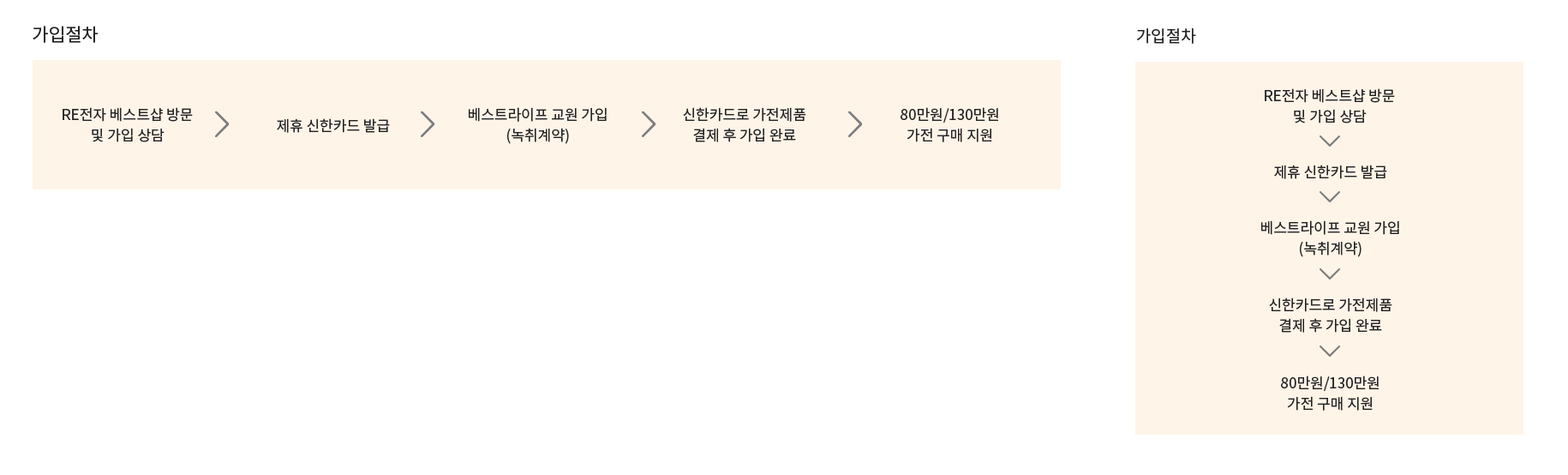
<style>
.page{position:relative;width:1568px;height:475px;background:#ffffff}
.page>*{position:absolute;margin:0}
.t1{font:18px "NotoSansKR-Regular";color:#222222}
.t2{font:16.3px "NotoSansKR-Regular";color:#222222}
.t3{font:14.6px/20.6px "NotoSansKR-Regular";color:#222222}
.t4{font:14.6px "NotoSansKR-Regular";color:#222222}
</style>
<div class="page">
<p class="t1" style="left:33px;top:26px;width:66px;height:17px">가입절차</p>
<p class="t2" style="left:1137px;top:28px;width:59px;height:16px">가입절차</p>
<p class="t3" style="left:1265px;top:88px;width:130px;height:35px;text-align:center">RE전자 베스트샵 방문<br>및 가입 상담</p>
<p class="t3" style="left:63px;top:107px;width:130px;height:35px;text-align:center">RE전자 베스트샵 방문<br>및 가입 상담</p>
<p class="t3" style="left:469px;top:107px;width:138px;height:37px;text-align:center">베스트라이프 교원 가입<br>(녹취계약)</p>
<p class="t3" style="left:683px;top:107px;width:123px;height:35px;text-align:center">신한카드로 가전제품<br>결제 후 가입 완료</p>
<p class="t3" style="left:901px;top:107px;width:97px;height:35px;text-align:center">80만원/130만원<br>가전 구매 지원</p>
<p class="t4" style="left:277px;top:118px;width:113px;height:15px">제휴 신한카드 발급</p>
<p class="t4" style="left:1274px;top:165px;width:113px;height:14px">제휴 신한카드 발급</p>
<p class="t3" style="left:1261px;top:220px;width:138px;height:37px;text-align:center">베스트라이프 교원 가입<br>(녹취계약)</p>
<p class="t3" style="left:1269px;top:297px;width:123px;height:35px;text-align:center">신한카드로 가전제품<br>결제 후 가입 완료</p>
<p class="t3" style="left:1281px;top:375px;width:98px;height:35px;text-align:center">80만원/130만원<br>가전 구매 지원</p>
</div>
